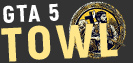
<style>
.page{position:relative;width:133px;height:63px;background:#333333}
.page>*{position:absolute;margin:0}
.t1{font:24px "Akrobat-Black";letter-spacing:0.075em;color:#ffffff}
.t2{font:48px "Akrobat-Black";letter-spacing:0.075em;color:#ffe68a}
</style>
<div class="page">
<p class="t1" style="left:3px;top:3px;width:56px;height:20px;rotate:-3deg">GTA 5</p>
<p class="t2" style="left:1px;top:23px;width:117px;height:39px;rotate:-3deg">TOWL</p>
</div>
